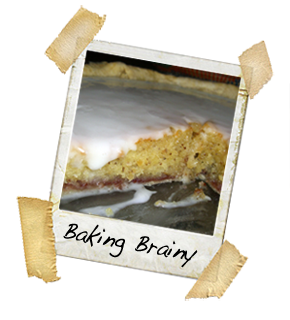
<style>
.page{position:relative;width:290px;height:320px;background:#ffffff}
.page>*{position:absolute;margin:0}
.t1{font:24.4px "Handwriting-Dakota";color:#000000;scale:0.91 1}
</style>
<div class="page">
<p class="t1" style="left:63px;top:223px;width:135px;height:45px;rotate:10deg">Baking Brainy</p>
</div>
